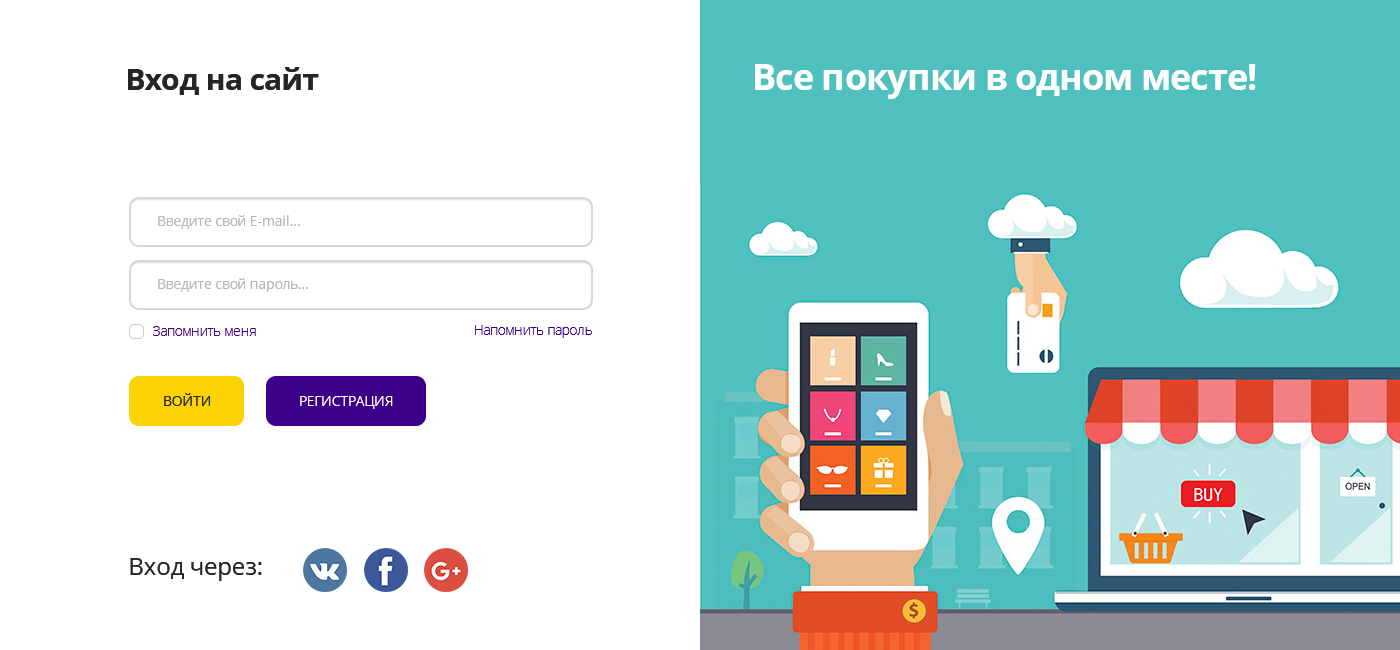
<style>
.page{position:relative;width:1400px;height:650px;background:#ffffff}
.page>*{position:absolute;margin:0}
.t1{font:36px "OpenSans-Bold";letter-spacing:-0.024em;color:#ffffff}
.t2{font:30px "OpenSans-Bold";letter-spacing:-0.024em;color:#252525}
.t3{font:14px "OpenSans";letter-spacing:-0.024em;color:#b7b7b7}
.t4{font:14px "OpenSans-Light";letter-spacing:-0.024em;color:#3b0086}
.t5{font:14px "OpenSans";letter-spacing:-0.024em;color:#252525}
.t6{font:14px "OpenSans";letter-spacing:-0.024em;color:#ffffff}
.t7{font:24px "OpenSans";letter-spacing:-0.024em;color:#252525}
</style>
<div class="page">
<p class="t1" style="left:755px;top:64px;width:501px;height:35px">Все покупки в одном месте!</p>
<p class="t2" style="left:128px;top:67px;width:191px;height:28px">Вход на сайт</p>
<p class="t3" style="left:158px;top:215px;width:142px;height:14px">Введите свой E-mail...</p>
<p class="t3" style="left:158px;top:278px;width:150px;height:14px">Введите свой пароль...</p>
<p class="t4" style="left:153px;top:326px;width:103px;height:10px">Запомнить меня</p>
<p class="t4" style="left:475px;top:325px;width:117px;height:13px">Напомнить пароль</p>
<p class="t5" style="left:164px;top:393px;width:46px;height:13px">ВОЙТИ</p>
<p class="t6" style="left:300px;top:396px;width:93px;height:13px">РЕГИСТРАЦИЯ</p>
<p class="t7" style="left:130px;top:558px;width:132px;height:23px">Вход через:</p>
</div>
